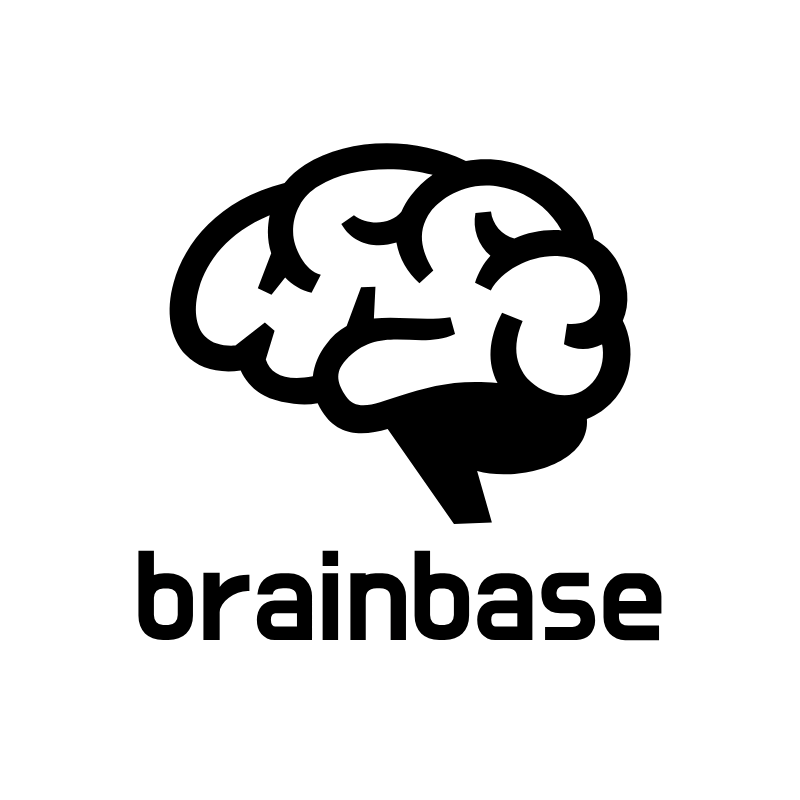
<style>
.page{position:relative;width:800px;height:800px;background:#ffffff}
.page>*{position:absolute;margin:0}
.t1{font:131px "DoHyeon-Regular";color:#000000}
</style>
<div class="page">
<p class="t1" style="left:138px;top:550px;width:524px;height:91px">brainbase</p>
</div>
